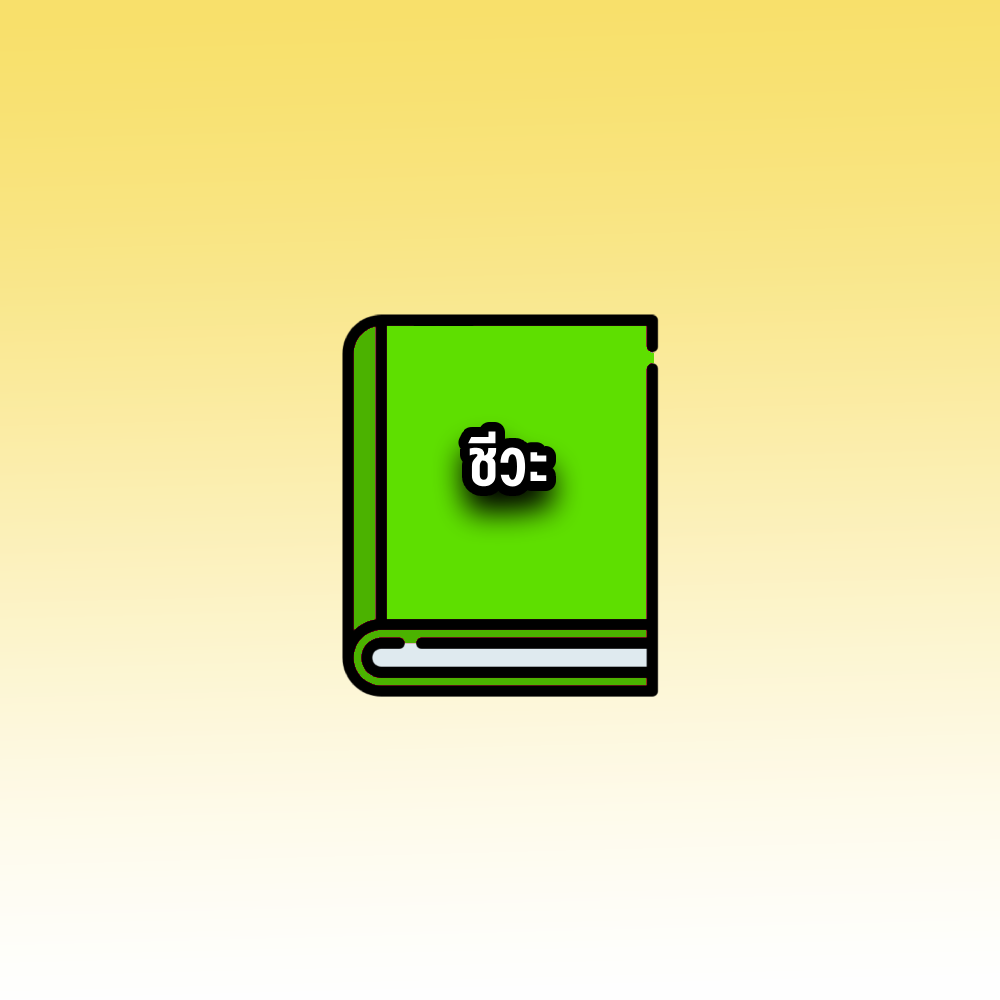
<style>
.page{position:relative;width:1000px;height:1000px}
.page>*{position:absolute;margin:0}
.t1{font:88.2px "DBHeavent-BoldCond";color:#ffffff}
</style>
<div class="page">
<p class="t1" style="left:468px;top:431px;width:79px;height:56px">ชีวะ</p>
</div>
